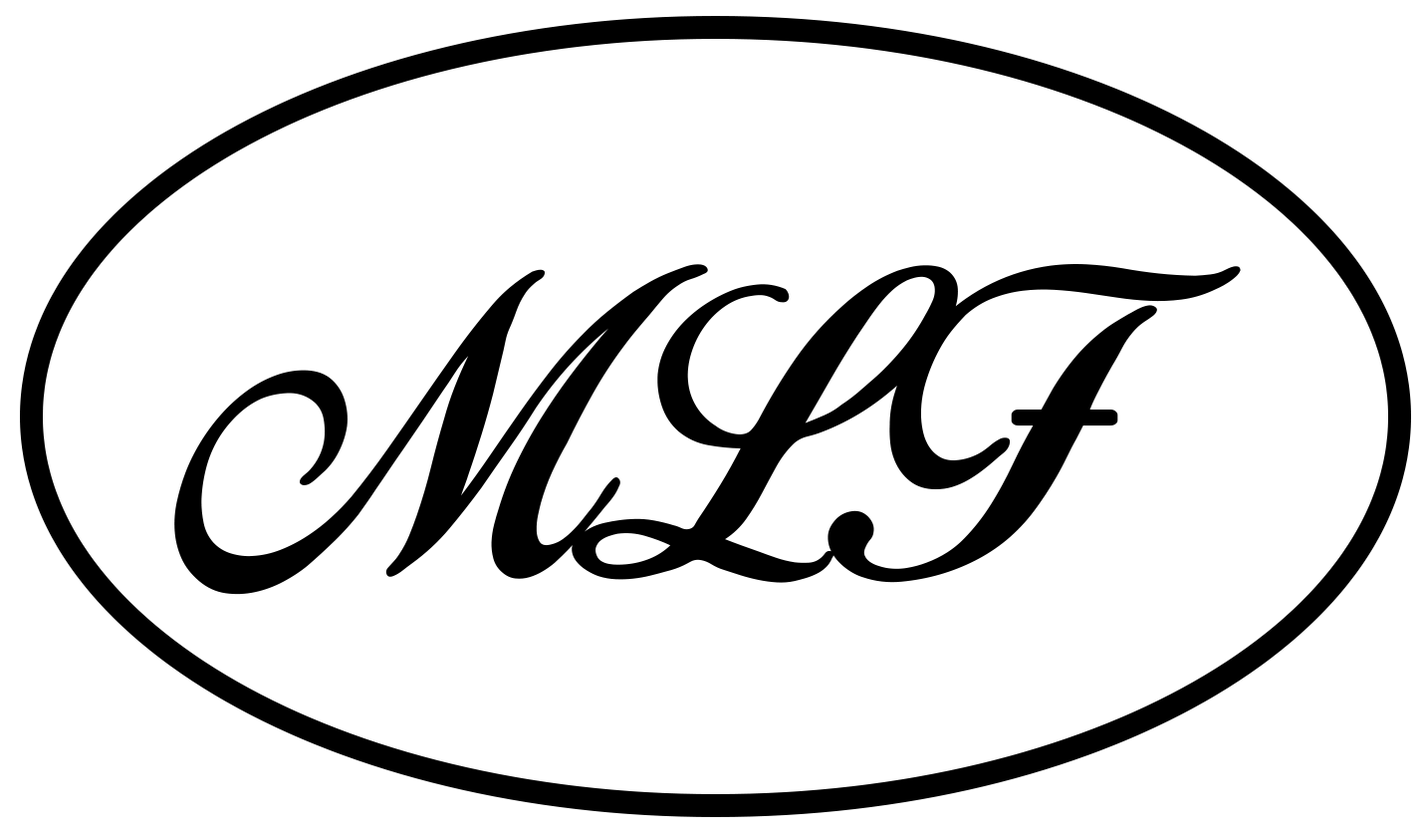
<style>
.page{position:relative;width:1423px;height:838px;background:#ffffff}
.page>*{position:absolute;margin:0}
.t1{font:373.5px "BirdsofParadise-PersonaluseOnly";color:#000000}
</style>
<div class="page">
<p class="t1" style="left:174px;top:264px;width:1067px;height:331px">MLF</p>
</div>
